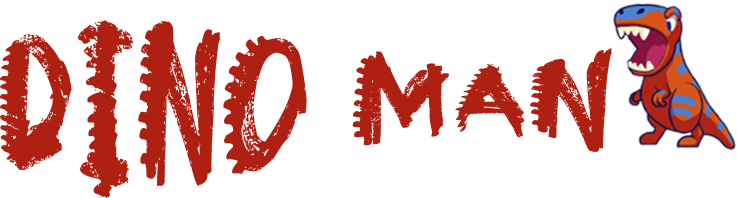
<style>
.page{position:relative;width:737px;height:198px;background:#ffffff}
.page>*{position:absolute;margin:0}
.t1{font:165.3px "Dinosaur";color:#ad2012}
</style>
<div class="page">
<p class="t1" style="left:0px;top:20px;width:612px;height:178px">DINO MAN</p>
</div>
